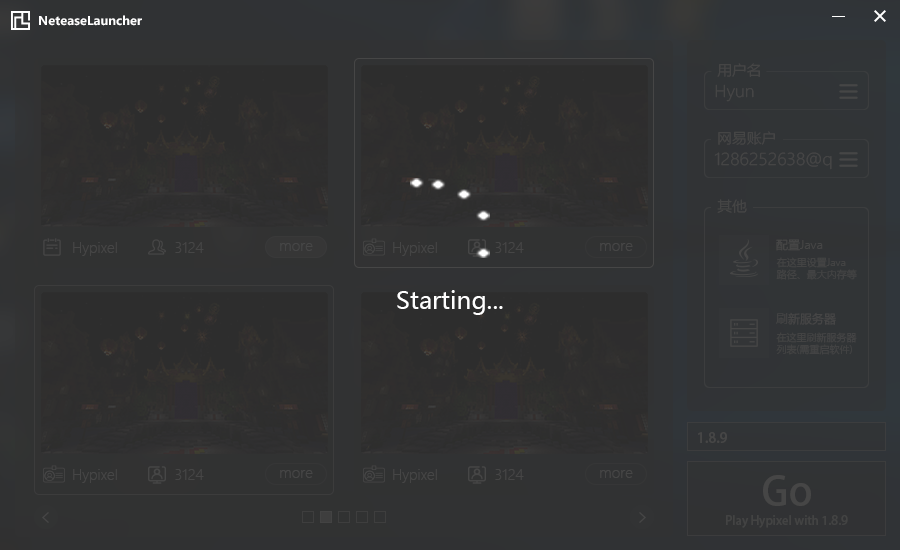
<style>
.page{position:relative;width:900px;height:550px}
.page>*{position:absolute;margin:0}
.t1{font:12px "MicrosoftYaHei-Bold";color:#ffffff}
.t2{font:14px "MicrosoftYaHeiLight";scale:1.05 1}
.t3{font:16px "MicrosoftYaHeiLight";scale:1.05 1}
.t4{font:14px "MicrosoftYaHeiLight";color:#464646;scale:1.05 1}
.t5{font:16px "MicrosoftYaHeiLight";color:#464646;scale:1.05 1}
.t6{font:14px "MicrosoftYaHeiLight";color:#464646}
.t7{font:12px "MicrosoftYaHeiLight";color:#464646}
.t8{font:10px/12px "MicrosoftYaHeiLight";color:#434343}
.t9{font:24px "MicrosoftYaHei";color:#ffffff}
.t10{font:10px/12px "MicrosoftYaHeiLight";color:#434344}
.t11{font:14px "AdobeHeitiStd-Regular";color:#464646}
.t12{font:40px "AdobeHeitiStd-Regular";color:#464646}
.t13{font:12px "AdobeHeitiStd-Regular";color:#434343}
</style>
<div class="page">
<p class="t1" style="left:39px;top:15px;width:103px;height:11px">NeteaseLauncher</p>
<p class="t2" style="left:717px;top:63px;width:43px;height:14px">用户名</p>
<p class="t3" style="left:715px;top:84px;width:39px;height:18px">Hyun</p>
<p class="t4" style="left:718px;top:131px;width:57px;height:14px">网易账户</p>
<p class="t5" style="left:714px;top:152px;width:118px;height:18px">1286252638@q</p>
<p class="t2" style="left:717px;top:199px;width:30px;height:14px">其他</p>
<p class="t6" style="left:73px;top:242px;width:44px;height:14px">Hypixel</p>
<p class="t6" style="left:175px;top:242px;width:29px;height:11px">3124</p>
<p class="t6" style="left:280px;top:243px;width:33px;height:8px">more</p>
<p class="t6" style="left:393px;top:242px;width:44px;height:14px">Hypixel</p>
<p class="t6" style="left:495px;top:242px;width:29px;height:11px">3124</p>
<p class="t6" style="left:600px;top:243px;width:33px;height:8px">more</p>
<p class="t7" style="left:776px;top:239px;width:47px;height:12px">配置Java</p>
<p class="t8" style="left:776px;top:257px;width:81px;height:23px">在这里设置Java<br>路径、最大内存等</p>
<p class="t9" style="left:397px;top:290px;width:106px;height:25px">Starting...</p>
<p class="t7" style="left:776px;top:312px;width:60px;height:13px">刷新服务器</p>
<p class="t10" style="left:776px;top:332px;width:81px;height:23px">在这里刷新服务器<br>列表(需重启软件)</p>
<p class="t11" style="left:698px;top:432px;width:29px;height:11px">1.8.9</p>
<p class="t6" style="left:73px;top:469px;width:44px;height:14px">Hypixel</p>
<p class="t6" style="left:175px;top:469px;width:29px;height:11px">3124</p>
<p class="t6" style="left:280px;top:470px;width:33px;height:8px">more</p>
<p class="t6" style="left:393px;top:469px;width:44px;height:14px">Hypixel</p>
<p class="t6" style="left:495px;top:469px;width:29px;height:11px">3124</p>
<p class="t6" style="left:600px;top:470px;width:33px;height:8px">more</p>
<p class="t12" style="left:763px;top:475px;width:48px;height:31px">Go</p>
<p class="t13" style="left:726px;top:515px;width:122px;height:13px">Play Hypixel with 1.8.9</p>
</div>
